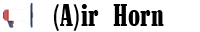
<style>
.page{position:relative;width:200px;height:32px;background:#ffffff}
.page>*{position:absolute;margin:0}
.t1{font:32px "Marlboro";color:#000000}
</style>
<div class="page">
<p class="t1" style="left:53px;top:4px;width:111px;height:27px">(A)ir Horn</p>
</div>
